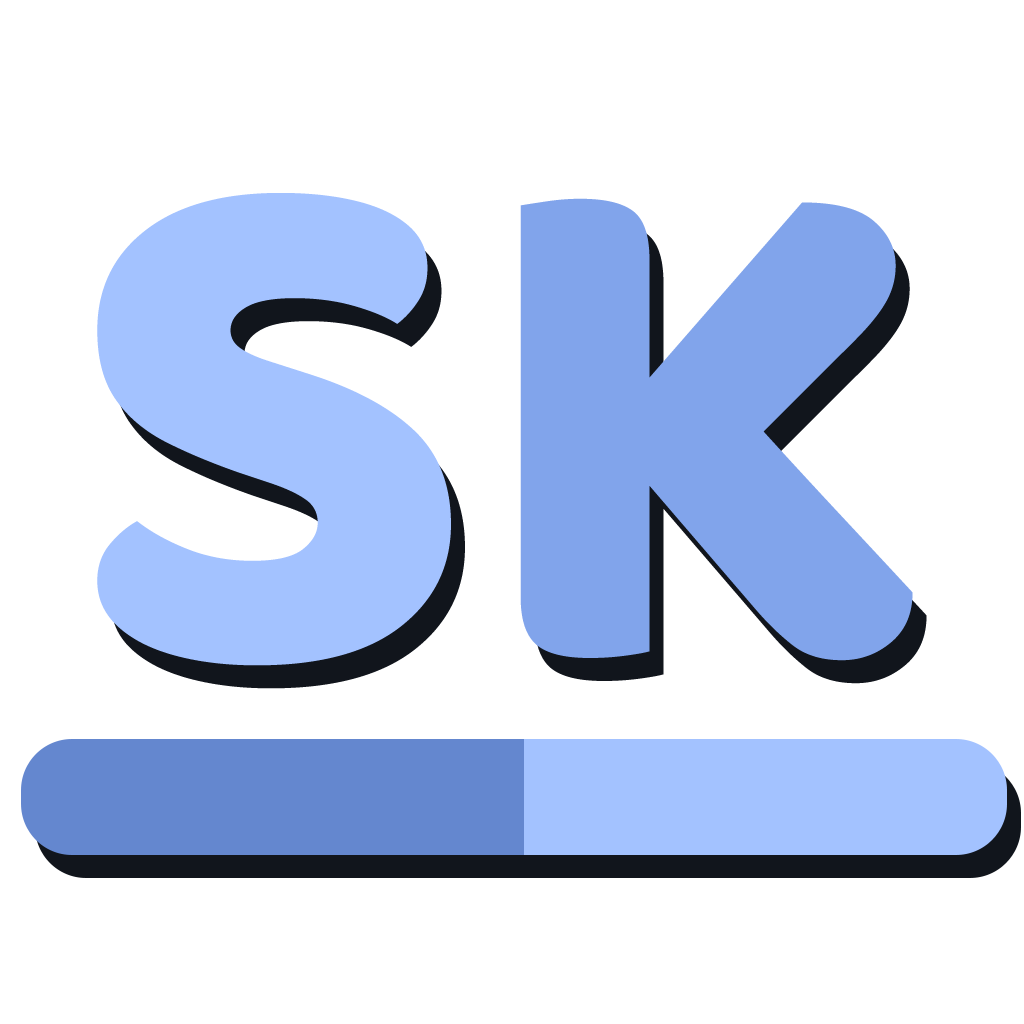
<style>
.page{position:relative;width:1024px;height:1024px;background:#ffffff}
.page>*{position:absolute;margin:0}
.t1{font:734.4px "BalooPaaji2-ExtraBold";color:#a3c2ff;text-transform:uppercase}
.t2{font:734.4px "BalooPaaji2-ExtraBold";color:#81a4eb;text-transform:uppercase}
</style>
<div class="page">
<p class="t1" style="left:97px;top:193px;width:816px;height:473px">s<span class="t2">k</span></p>
</div>
